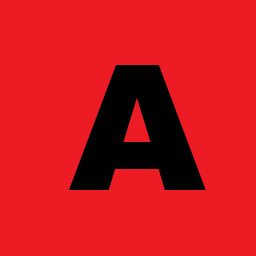
<style>
.page{position:relative;width:256px;height:256px;background:#ed1b24}
.page>*{position:absolute;margin:0}
.t1{font:174.7px "Arial-Black";color:#010101}
</style>
<div class="page">
<p class="t1" style="left:69px;top:65px;width:137px;height:125px">A</p>
</div>
